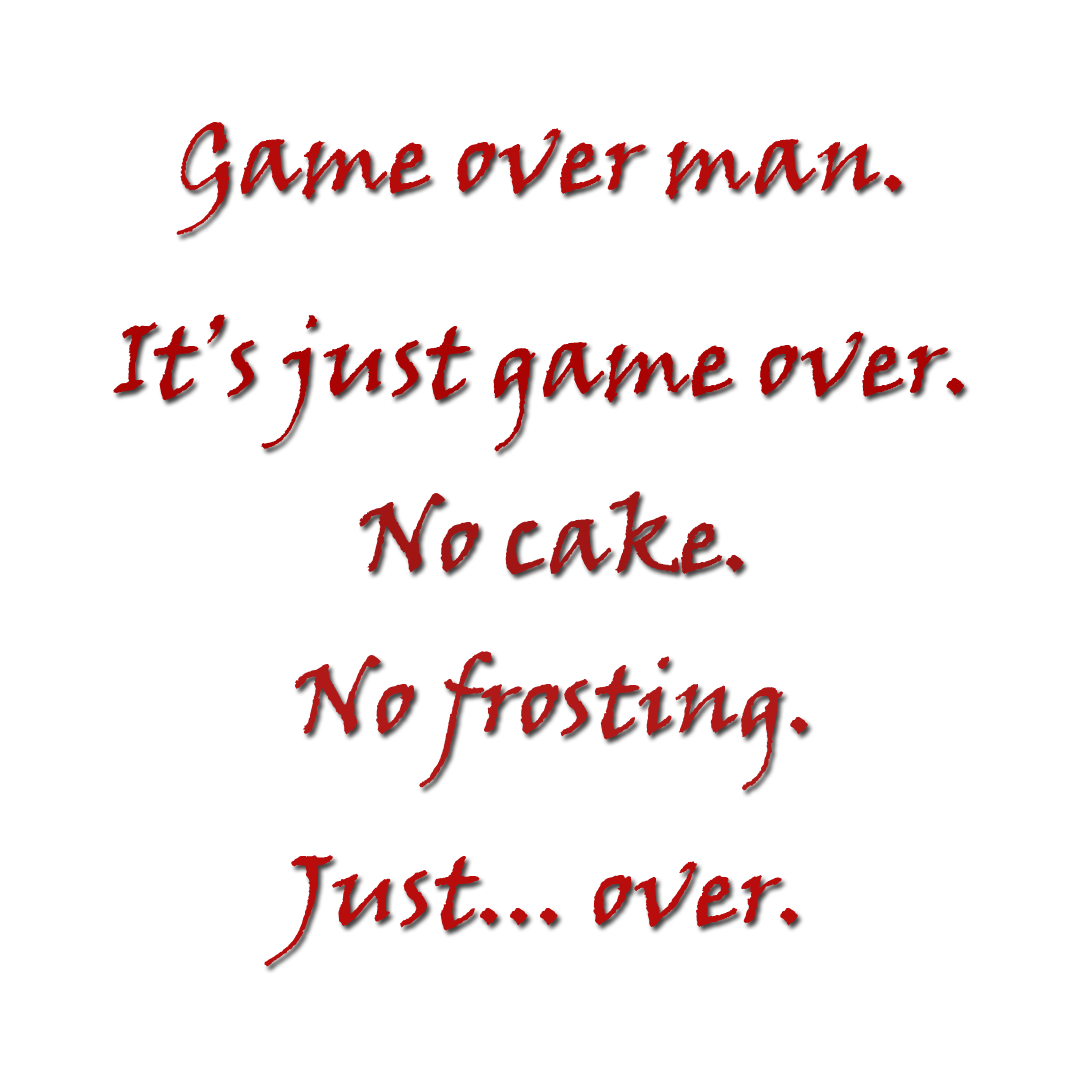
<style>
.page{position:relative;width:1080px;height:1080px;background:#ffffff}
.page>*{position:absolute;margin:0}
.t1{font:100px "VinerHandITC";color:#b50b0b}
.t2{font:100px "VinerHandITC";color:#a90303}
.t3{font:100px "VinerHandITC";color:#a21515}
.t4{font:100px "VinerHandITC";color:#b11818}
.t5{font:100px "VinerHandITC";color:#b90c0c}
</style>
<div class="page">
<p class="t1" style="left:176px;top:122px;width:726px;height:113px">Game over man.</p>
<p class="t2" style="left:113px;top:314px;width:851px;height:138px">It’s just game over.</p>
<p class="t3" style="left:359px;top:491px;width:385px;height:84px">No cake.</p>
<p class="t4" style="left:295px;top:651px;width:513px;height:140px">No frosting.</p>
<p class="t5" style="left:264px;top:855px;width:534px;height:112px">Just... over.</p>
</div>
